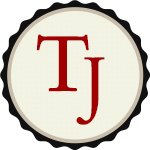
<style>
.page{position:relative;width:150px;height:150px;background:#ffffff}
.page>*{position:absolute;margin:0}
.t1{font:84px "ETBembo-RomanLF";color:#a00000}
.t2{font:72px "ETBembo-RomanLF";color:#a00000}
</style>
<div class="page">
<p class="t1" style="left:36px;top:34px;width:53px;height:58px">T</p>
<p class="t2" style="left:76px;top:57px;width:29px;height:68px">J</p>
</div>
